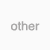
<style>
.page{position:relative;width:50px;height:50px;background:#fafafa}
.page>*{position:absolute;margin:0}
.t1{font:12.5px "Helvetica";color:#a8a7a7}
</style>
<div class="page">
<p class="t1" style="left:11px;top:21px;width:29px;height:10px">other</p>
</div>
